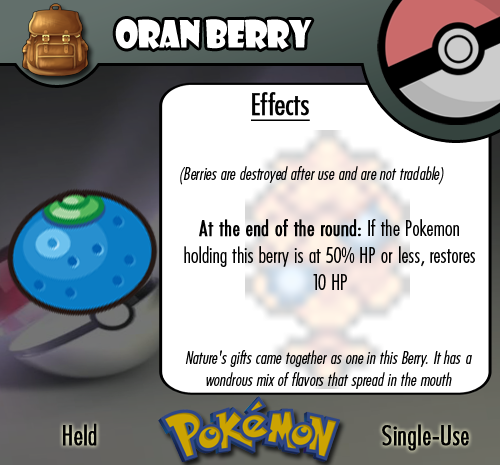
<style>
.page{position:relative;width:500px;height:465px;background:#ffffff}
.page>*{position:absolute;margin:0}
.t1{font:36.7px "ShowcardGothic-Reg";letter-spacing:-0.025em;color:#ffffff;scale:0.91 1}
.t2{font:22.2px "FuturaCondensedBQ-Light";color:#010101}
.t3{font:27.8px "FuturaCondensedBQ-Light";color:#010101;font-weight:bold}
.t4{font:30.6px "FuturaCondensedBQ-Light";color:#010101;font-weight:bold;text-decoration:underline}
.t5{font:18.1px "FuturaCondensedBQ-Light";color:#010101;font-style:italic}
.t6{font:22.2px "FuturaCondensedBQ-Light";color:#010101;font-weight:bold}
</style>
<div class="page">
<p class="t1" style="left:115px;top:19px;width:197px;height:31px">Oran Berry</p>
<p class="t2" style="left:180px;top:92px;width:295px;height:198px"><span class="t3">  </span><span class="t4">Effects<br><br><br></span><span class="t5">(Berries are destroyed after use and are not tradable)<br><br><br><br></span><span class="t6">At the end of the round: </span>If the Pokemon holding this berry is at 50% HP or less, restores 10 HP</p>
<p class="t5" style="left:185px;top:350px;width:287px;height:39px;text-align:center">Nature's gifts came together as one in this Berry. It has a wondrous mix of flavors that spread in the mouth</p>
<p class="t3" style="left:63px;top:423px;width:34px;height:23px">Held</p>
<p class="t3" style="left:382px;top:424px;width:87px;height:27px">Single-Use</p>
</div>
